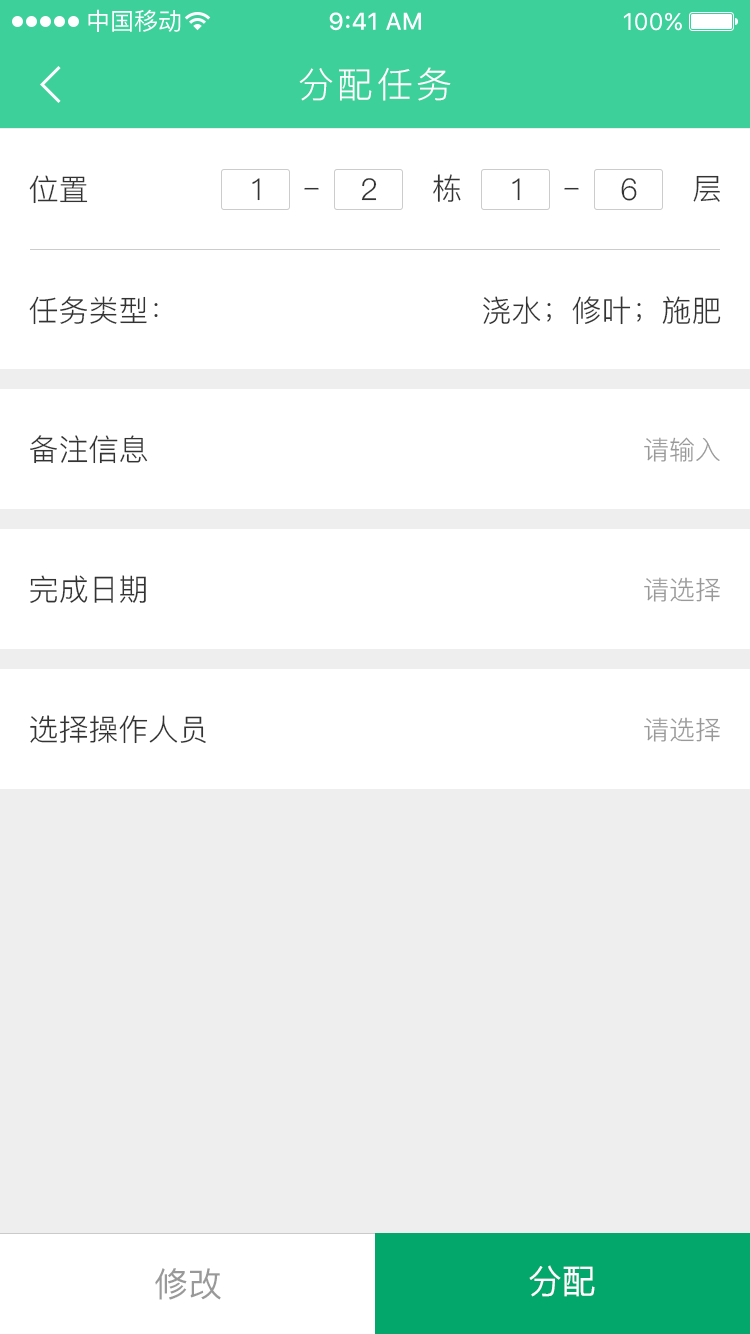
<style>
.page{position:relative;width:750px;height:1334px;background:#ffffff}
.page>*{position:absolute;margin:0}
.t1{font:36px "PingFang-SC-Regular";letter-spacing:0.1em;color:#ffffff}
.t2{font:30px "PingFang-SC-Regular";letter-spacing:0.06em;color:#333333}
.t3{font:30px "PingFang-SC-Regular";color:#333333}
.t4{font:28px "PingFang-SC-Regular";letter-spacing:0.06em;color:#333333}
.t5{font:26px "PingFang-SC-Regular";color:#999999}
.t6{font:34px "PingFang-SC-Medium";color:#ffffff}
.t7{font:34px "PingFang-SC-Medium";color:#999999}
</style>
<div class="page">
<p class="t1" style="left:299px;top:67px;width:152px;height:34px">分配任务</p>
<p class="t2" style="left:433px;top:174px;width:28px;height:28px">栋</p>
<p class="t3" style="left:29px;top:175px;width:59px;height:29px">位置</p>
<p class="t2" style="left:252px;top:178px;width:8px;height:23px">1</p>
<p class="t2" style="left:361px;top:178px;width:16px;height:23px">2</p>
<p class="t2" style="left:512px;top:178px;width:8px;height:23px">1</p>
<p class="t2" style="left:621px;top:178px;width:16px;height:23px">6</p>
<p class="t2" style="left:693px;top:175px;width:27px;height:27px">层</p>
<p class="t4" style="left:304px;top:187px;width:15px;height:3px">-</p>
<p class="t4" style="left:564px;top:187px;width:15px;height:3px">-</p>
<p class="t3" style="left:29px;top:296px;width:129px;height:29px">任务类型：</p>
<p class="t3" style="left:483px;top:296px;width:238px;height:29px">浇水；修叶；施肥</p>
<p class="t3" style="left:30px;top:435px;width:118px;height:29px">备注信息</p>
<p class="t5" style="left:644px;top:437px;width:76px;height:25px">请输入</p>
<p class="t3" style="left:30px;top:575px;width:116px;height:28px">完成日期</p>
<p class="t5" style="left:644px;top:577px;width:76px;height:25px">请选择</p>
<p class="t3" style="left:30px;top:715px;width:176px;height:29px">选择操作人员</p>
<p class="t5" style="left:644px;top:717px;width:76px;height:25px">请选择</p>
<p class="t6" style="left:529px;top:1265px;width:66px;height:32px">分配</p>
<p class="t7" style="left:155px;top:1268px;width:66px;height:32px">修改</p>
</div>
